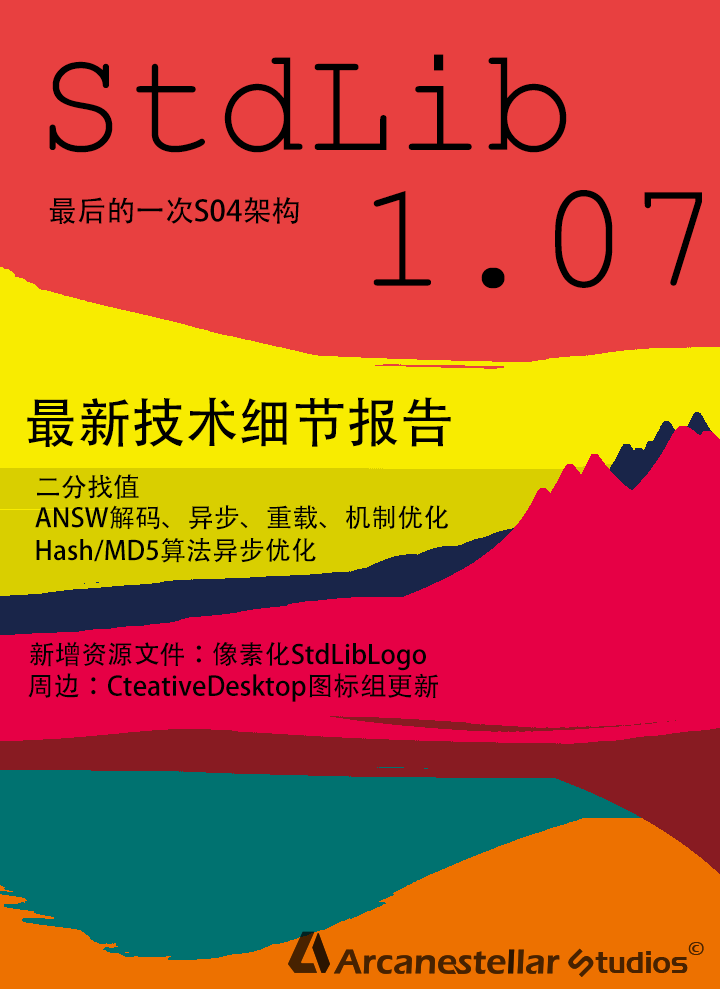
<style>
.page{position:relative;width:720px;height:989px;background:#e84040}
.page>*{position:absolute;margin:0}
.t1{font:150.1px "CourierNewPSMT";color:#000000}
.t2{font:29.2px "AdobeHeitiStd-Regular";color:#000000}
.t3{font:152.2px "CourierNewPSMT";color:#000000}
.t4{font:53.7px "AdobeHeitiStd-Regular";color:#000000}
.t5{font:26.2px "AdobeHeitiStd-Regular";color:#000000}
.t6{font:26.6px "AdobeHeitiStd-Regular";color:#000000}
</style>
<div class="page">
<p class="t1" style="left:49px;top:54px;width:518px;height:99px">StdLib</p>
<p class="t2" style="left:49px;top:197px;width:250px;height:27px">最后的一次S04架构</p>
<p class="t3" style="left:373px;top:190px;width:329px;height:99px">1.07</p>
<p class="t4" style="left:27px;top:397px;width:424px;height:51px">最新技术细节报告</p>
<p class="t5" style="left:37px;top:474px;width:102px;height:25px">二分找值</p>
<p class="t5" style="left:35px;top:505px;width:414px;height:25px">ANSW解码、异步、重载、机制优化</p>
<p class="t5" style="left:36px;top:538px;width:280px;height:25px">Hash/MD5算法异步优化</p>
<p class="t5" style="left:29px;top:641px;width:397px;height:30px">新增资源文件：像素化StdLibLogo</p>
<p class="t6" style="left:28px;top:673px;width:410px;height:29px">周边：CteativeDesktop图标组更新</p>
</div>
